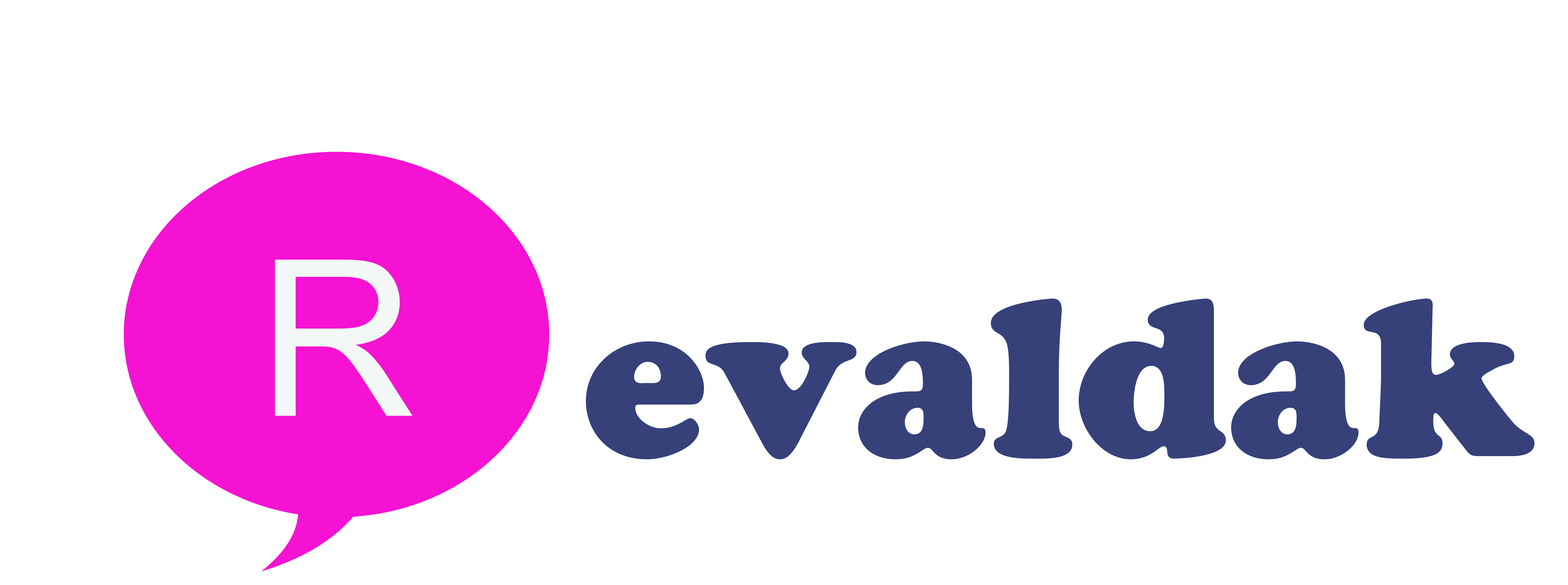
<style>
.page{position:relative;width:1568px;height:585px;background:#ffffff}
.page>*{position:absolute;margin:0}
.t1{font:217.9px "ArialMT";color:#f3f7f5}
.t2{font:224.5px "CooperBlackStd";color:#36417a}
</style>
<div class="page">
<p class="t1" style="left:275px;top:260px;width:138px;height:156px">R</p>
<p class="t2" style="left:586px;top:298px;width:949px;height:161px">evaldak</p>
</div>
